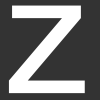
<style>
.page{position:relative;width:100px;height:100px;background:#333333}
.page>*{position:absolute;margin:0}
.t1{font:200px "SimHei";color:#ffffff}
</style>
<div class="page">
<p class="t1" style="left:8px;top:5px;width:77px;height:89px">z</p>
</div>
